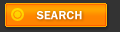
<style>
.page{position:relative;width:120px;height:32px}
.page>*{position:absolute;margin:0}
.t1{font:12px "FranklinGothicDemiC";color:#ffffff;text-transform:uppercase}
</style>
<div class="page">
<p class="t1" style="left:36px;top:11px;width:46px;height:9px">SEARCH</p>
</div>
